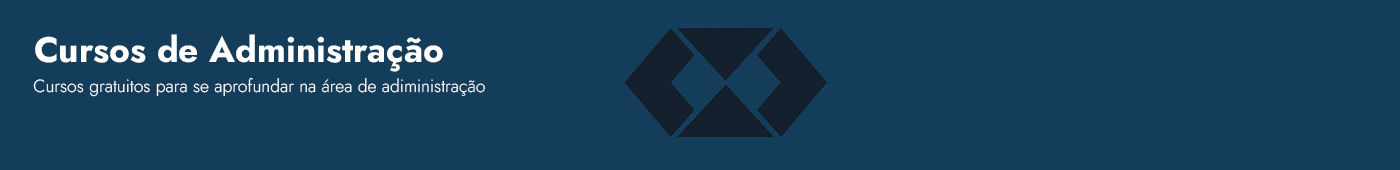
<style>
.page{position:relative;width:1400px;height:170px;background:#143d5b}
.page>*{position:absolute;margin:0}
.t1{font:35.3px "Jost-Bold";color:#ffffff}
.t2{font:17.6px "Jost-Light";color:#ffffff}
</style>
<div class="page">
<p class="t1" style="left:35px;top:34px;width:408px;height:38px">Cursos de Administração</p>
<p class="t2" style="left:33px;top:77px;width:452px;height:20px">Cursos gratuitos para se aprofundar na área de adiministração</p>
</div>
